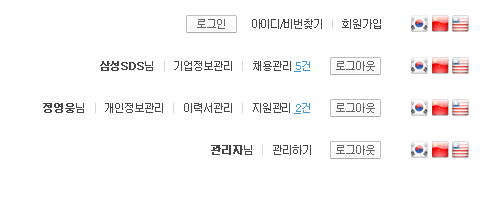
<style>
.page{position:relative;width:500px;height:200px;background:#ffffff}
.page>*{position:absolute;margin:0}
.t1{font:11px "Dotum";letter-spacing:-0.1em;color:#464646}
.t2{font:11px "Dotum";letter-spacing:-0.1em;color:#d6d6d6}
.t3{font:11px "Dotum";letter-spacing:-0.1em;color:#464646;font-weight:bold}
.t4{font:11px "Dotum";letter-spacing:-0.1em;color:#666666}
.t5{font:11px "Dotum";color:#4298d5;text-decoration:underline}
.t6{font:11px "Dotum";color:#4298d5}
</style>
<div class="page">
<p class="t1" style="left:197px;top:19px;width:184px;height:10px">로그인   <span class="t2">| </span>    아이디/비번찾기   <span class="t2">|</span>   회원가입</p>
<p class="t1" style="left:100px;top:61px;width:275px;height:10px"><span class="t3">삼성SDS</span>님   <span class="t2">| </span>  기업정보관리   <span class="t2">| </span>  채용관리               <span class="t4">로그아웃</span></p>
<p class="t5" style="left:294px;top:61px;width:16px;height:11px">5<span class="t6">건</span></p>
<p class="t1" style="left:43px;top:103px;width:326px;height:10px"><span class="t3">정영웅</span>님   <span class="t2">| </span>  개인정보관리   <span class="t2">| </span>  이력서관리   <span class="t2">|</span>   지원관리             로그아웃</p>
<p class="t5" style="left:294px;top:103px;width:16px;height:11px">2<span class="t6">건</span></p>
<p class="t1" style="left:211px;top:145px;width:158px;height:10px"><span class="t3">관리자</span>님   <span class="t2">| </span>  관리하기      로그아웃</p>
</div>
